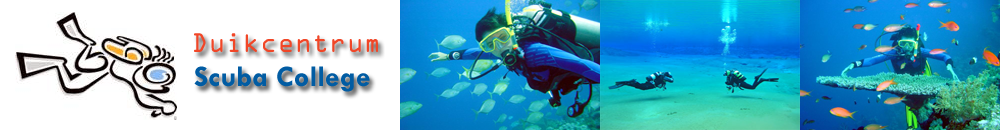
<style>
.page{position:relative;width:1000px;height:130px;background:#ffffff}
.page>*{position:absolute;margin:0}
.t1{font:24px "OCRAStd";color:#f14627}
.t2{font:30px "TwCenMT-Bold";color:#015ca3}
</style>
<div class="page">
<p class="t1" style="left:194px;top:33px;width:184px;height:19px">Duikcentrum</p>
<p class="t2" style="left:194px;top:66px;width:176px;height:26px">Scuba College</p>
</div>
